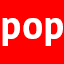
<style>
.page{position:relative;width:64px;height:64px;background:#ff0000}
.page>*{position:absolute;margin:0}
.t1{font:36px "KohinoorBangla-Bold";color:#ffffff}
</style>
<div class="page">
<p class="t1" style="left:2px;top:18px;width:61px;height:28px">pop</p>
</div>
